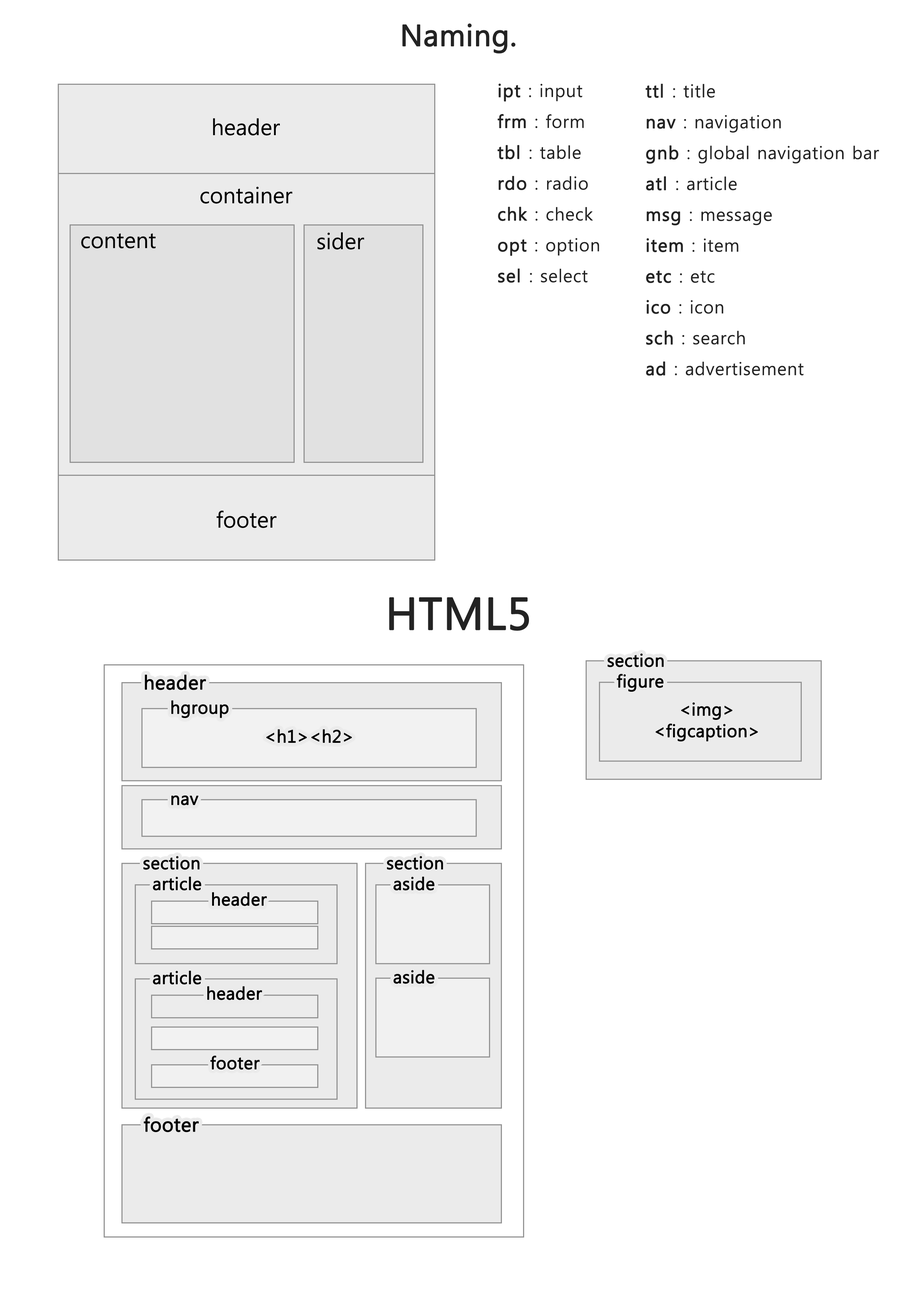
<style>
.page{position:relative;width:918px;height:1299px;background:#ffffff}
.page>*{position:absolute;margin:0}
.t1{font:29.3px "MalgunGothicRegular";color:#232323;font-weight:bold}
.t2{font:17.6px/30.9px "MalgunGothicRegular";letter-spacing:0.03em;color:#232323}
.t3{font:17.6px/30.9px "MalgunGothicRegular";letter-spacing:0.03em;color:#232323;font-weight:bold}
.t4{font:22px "MalgunGothicRegular";color:#000000}
.t5{font:44px "MalgunGothicRegular";color:#232323;text-transform:uppercase;font-weight:bold}
.t6{font:17.1px "MalgunGothicRegular";color:#000000;font-weight:bold}
.t7{font:19.1px "MalgunGothicRegular";color:#000000;font-weight:bold}
</style>
<div class="page">
<p class="t1" style="left:402px;top:23px;width:114px;height:31px">Naming.</p>
<p class="t2" style="left:498px;top:83px;width:101px;height:200px"><span class="t3">ipt</span> : input<br><span class="t3">frm</span> : form<br><span class="t3">tbl </span>: table<br><span class="t3">rdo</span> : radio<br><span class="t3">chk</span> : check<br><span class="t3">opt</span> : option<br><span class="t3">sel </span>: select</p>
<p class="t2" style="left:646px;top:84px;width:233px;height:292px"><span class="t3">ttl </span>: title<br><span class="t3">nav</span> : navigation<br><span class="t3">gnb</span> : global navigation bar<br><span class="t3">atl </span>: article<br><span class="t3">msg</span> : message<br><span class="t3">item</span> : item<br><span class="t3">etc</span> : etc<br><span class="t3">ico</span> : icon<br><span class="t3">sch</span> : search<br><span class="t3">ad</span> : advertisement</p>
<p class="t4" style="left:213px;top:118px;width:67px;height:18px">header</p>
<p class="t4" style="left:200px;top:187px;width:92px;height:17px">container</p>
<p class="t4" style="left:81px;top:233px;width:75px;height:15px">content</p>
<p class="t4" style="left:317px;top:232px;width:47px;height:18px">sider</p>
<p class="t4" style="left:217px;top:511px;width:60px;height:17px">footer</p>
<p class="t5" style="left:389px;top:597px;width:140px;height:34px">html5</p>
<p class="t6" style="left:608px;top:653px;width:56px;height:14px">section</p>
<p class="t7" style="left:145px;top:675px;width:61px;height:15px">header</p>
<p class="t6" style="left:617px;top:673px;width:47px;height:19px">figure</p>
<p class="t6" style="left:171px;top:700px;width:58px;height:18px">hgroup</p>
<p class="t6" style="left:656px;top:702px;width:102px;height:40px;text-align:center">&lt;img&gt;<br>&lt;figcaption&gt;</p>
<p class="t6" style="left:266px;top:729px;width:86px;height:14px">&lt;h1&gt;&lt;h2&gt;</p>
<p class="t6" style="left:171px;top:795px;width:27px;height:10px">nav</p>
<p class="t6" style="left:143px;top:856px;width:57px;height:14px">section</p>
<p class="t6" style="left:387px;top:856px;width:56px;height:14px">section</p>
<p class="t6" style="left:153px;top:876px;width:48px;height:14px">article</p>
<p class="t6" style="left:394px;top:876px;width:41px;height:14px">aside</p>
<p class="t6" style="left:212px;top:892px;width:55px;height:14px">header</p>
<p class="t6" style="left:153px;top:970px;width:48px;height:14px">article</p>
<p class="t6" style="left:394px;top:970px;width:41px;height:14px">aside</p>
<p class="t6" style="left:207px;top:986px;width:55px;height:14px">header</p>
<p class="t6" style="left:210px;top:1055px;width:50px;height:15px">footer</p>
<p class="t7" style="left:144px;top:1116px;width:55px;height:16px">footer</p>
</div>
